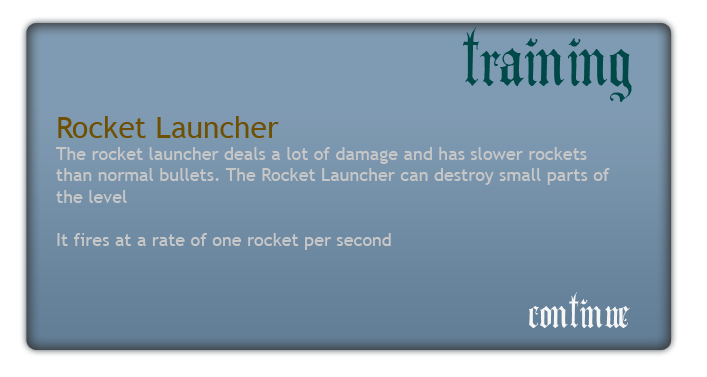
<style>
.page{position:relative;width:707px;height:377px}
.page>*{position:absolute;margin:0}
.t1{font:100px "AngloText";color:#004948}
.t2{font:18px "TrebuchetMS";color:#c7c7c7}
.t3{font:30px "TrebuchetMS";color:#6f4f01}
.t4{font:60px "AngloText";color:#f6f6f6}
</style>
<div class="page">
<p class="t1" style="left:463px;top:27px;width:169px;height:75px">training</p>
<p class="t2" style="left:56px;top:116px;width:554px;height:134px"><span class="t3">Rocket Launcher<br></span>The rocket launcher deals a lot of damage and has slower rockets<br>than normal bullets. The Rocket Launcher can destroy small parts of<br>the level<br><br>It fires at a rate of one rocket per second</p>
<p class="t4" style="left:529px;top:292px;width:101px;height:36px">continue</p>
</div>
